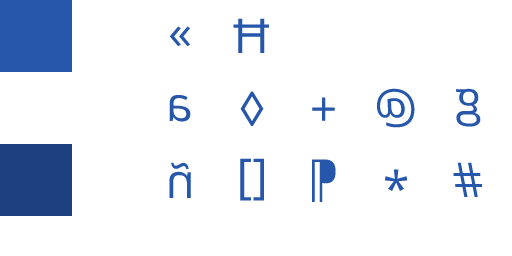
<style>
.page{position:relative;width:512px;height:256px;background:#ffffff}
.page>*{position:absolute;margin:0}
.t1{font:48px "OpenSans";color:#2757ab}
</style>
<div class="page">
<p class="t1" style="left:170px;top:26px;width:20px;height:21px;rotate:180deg">»</p>
<p class="t1" style="left:233px;top:18px;width:36px;height:35px;rotate:180deg">Ħ</p>
<p class="t1" style="left:377px;top:88px;width:38px;height:40px;rotate:180deg">@</p>
<p class="t1" style="left:456px;top:88px;width:25px;height:39px;rotate:180deg">g</p>
<p class="t1" style="left:169px;top:95px;width:22px;height:27px;rotate:180deg">a</p>
<p class="t1" style="left:240px;top:91px;width:24px;height:35px;rotate:180deg">◊</p>
<p class="t1" style="left:312px;top:97px;width:23px;height:24px;rotate:180deg">+</p>
<p class="t1" style="left:240px;top:158px;width:24px;height:43px;rotate:180deg">[]</p>
<p class="t1" style="left:312px;top:159px;width:24px;height:43px;rotate:180deg">¶</p>
<p class="t1" style="left:169px;top:162px;width:22px;height:36px;rotate:180deg">ñ</p>
<p class="t1" style="left:385px;top:169px;width:23px;height:22px;rotate:180deg">*</p>
<p class="t1" style="left:453px;top:162px;width:29px;height:35px;rotate:180deg">#</p>
</div>
